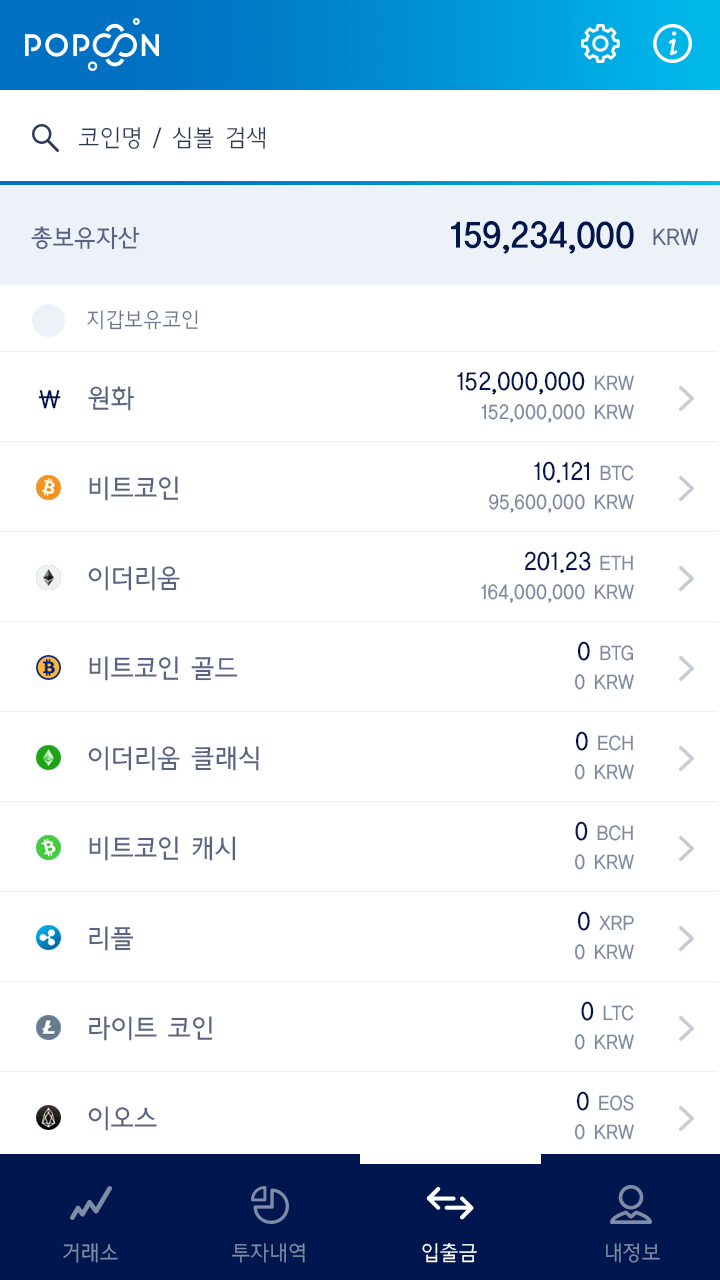
<style>
.page{position:relative;width:720px;height:1280px;background:#ffffff}
.page>*{position:absolute;margin:0}
.t1{font:24px "CreGoL";color:#2f3b56}
.t2{font:36px "CreGoB";color:#00164f}
.t3{font:24px "CreGoM";color:#586481}
.t4{font:21px "CreGoL";color:#6e788f}
.t5{font:26px/90px "CreGoM";color:#00164f}
.t6{font:21px/90px "CreGoM";color:#7e89a2}
.t7{font:26px "CreGoM";color:#00164f}
.t8{font:21px "CreGoL";color:#808ba7}
.t9{font:21px "CreGoL";color:#ffffff}
</style>
<div class="page">
<p class="t1" style="left:78px;top:127px;width:188px;height:22px">코인명 / 심볼 검색</p>
<p class="t2" style="left:451px;top:221px;width:183px;height:33px">159,234,000</p>
<p class="t3" style="left:31px;top:226px;width:109px;height:24px">총보유자산</p>
<p class="t3" style="left:653px;top:228px;width:45px;height:18px">KRW</p>
<p class="t4" style="left:87px;top:310px;width:111px;height:20px">지갑보유코인</p>
<p class="t5" style="left:457px;top:371px;width:177px;height:740px;text-align:right">152,000,000<span class="t6"> KRW<br></span>10.121<span class="t6"> BTC<br></span>201.23<span class="t6"> ETH<br></span>0<span class="t6"> BTG<br></span>0<span class="t6"> ECH<br></span>0<span class="t6"> BCH<br></span>0<span class="t6"> XRP<br></span>0<span class="t6"> LTC<br></span>0<span class="t6"> EOS</span></p>
<p class="t7" style="left:38px;top:390px;width:23px;height:19px">\</p>
<p class="t6" style="left:481px;top:404px;width:153px;height:736px;text-align:right">152,000,000 KRW<br>95,600,000 KRW<br>164,000,000 KRW<br>0 KRW<br>0 KRW<br>0 KRW<br>0 KRW<br>0 KRW<br>0 KRW</p>
<p class="t8" style="left:63px;top:1243px;width:55px;height:20px">거래소</p>
<p class="t8" style="left:232px;top:1243px;width:73px;height:20px">투자내역</p>
<p class="t9" style="left:422px;top:1243px;width:55px;height:20px">입출금</p>
<p class="t8" style="left:606px;top:1243px;width:54px;height:20px">내정보</p>
</div>
